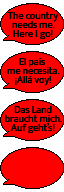
<style>
.page{position:relative;width:64px;height:192px;background:#ff0000}
.page>*{position:absolute;margin:0}
.t1{font:10px/9px "MuktaVaani-Regular";color:#000000}
</style>
<div class="page">
<p class="t1" style="left:5px;top:12px;width:57px;height:121px;text-align:center">The country<br>needs me.<br>Here I go!<br><br><br>El país <br>me necesita.<br>¡Allá voy!<br><br><br>Das Land<br>braucht mich.<br>Auf geht’s!</p>
</div>
